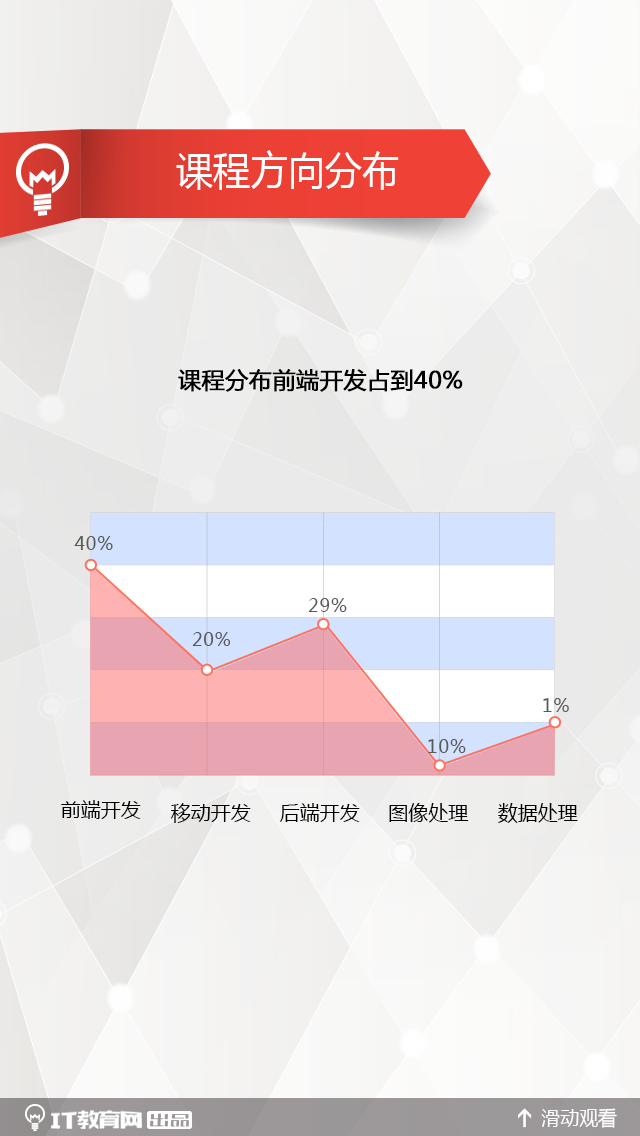
<style>
.page{position:relative;width:640px;height:1136px}
.page>*{position:absolute;margin:0}
.t1{font:40px "MicrosoftYaHei";color:#ffffff;scale:0.93 1}
.t2{font:23px "MicrosoftYaHei";color:#000000;font-weight:bold}
.t3{font:18px "MicrosoftYaHei";letter-spacing:0.05em;color:#595959}
.t4{font:20px "MicrosoftYaHei";color:#000000}
.t5{font:20.2px "MicrosoftYaHei";color:#ffffff;scale:0.94 1}
</style>
<div class="page">
<p class="t1" style="left:176px;top:150px;width:223px;height:40px">课程方向分布</p>
<p class="t2" style="left:178px;top:369px;width:285px;height:23px">课程分布前端开发占到40%</p>
<p class="t3" style="left:74px;top:536px;width:39px;height:14px">40%</p>
<p class="t3" style="left:308px;top:598px;width:39px;height:14px">29%</p>
<p class="t3" style="left:192px;top:632px;width:39px;height:14px">20%</p>
<p class="t3" style="left:543px;top:698px;width:26px;height:14px">1%</p>
<p class="t3" style="left:428px;top:739px;width:38px;height:14px">10%</p>
<p class="t4" style="left:61px;top:800px;width:80px;height:19px">前端开发</p>
<p class="t4" style="left:171px;top:803px;width:80px;height:20px">移动开发</p>
<p class="t4" style="left:279px;top:803px;width:81px;height:19px">后端开发</p>
<p class="t4" style="left:389px;top:803px;width:80px;height:20px">图像处理</p>
<p class="t4" style="left:498px;top:803px;width:80px;height:20px">数据处理</p>
<p class="t5" style="left:541px;top:1108px;width:76px;height:20px">滑动观看</p>
</div>
